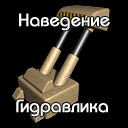
<style>
.page{position:relative;width:128px;height:128px;background:#000000}
.page>*{position:absolute;margin:0}
.t1{font:18px "BauhausC-Medium";color:#ffffff;font-weight:bold}
</style>
<div class="page">
<p class="t1" style="left:19px;top:13px;width:91px;height:18px">Наведение</p>
<p class="t1" style="left:16px;top:99px;width:92px;height:18px">Гидравлика</p>
</div>
